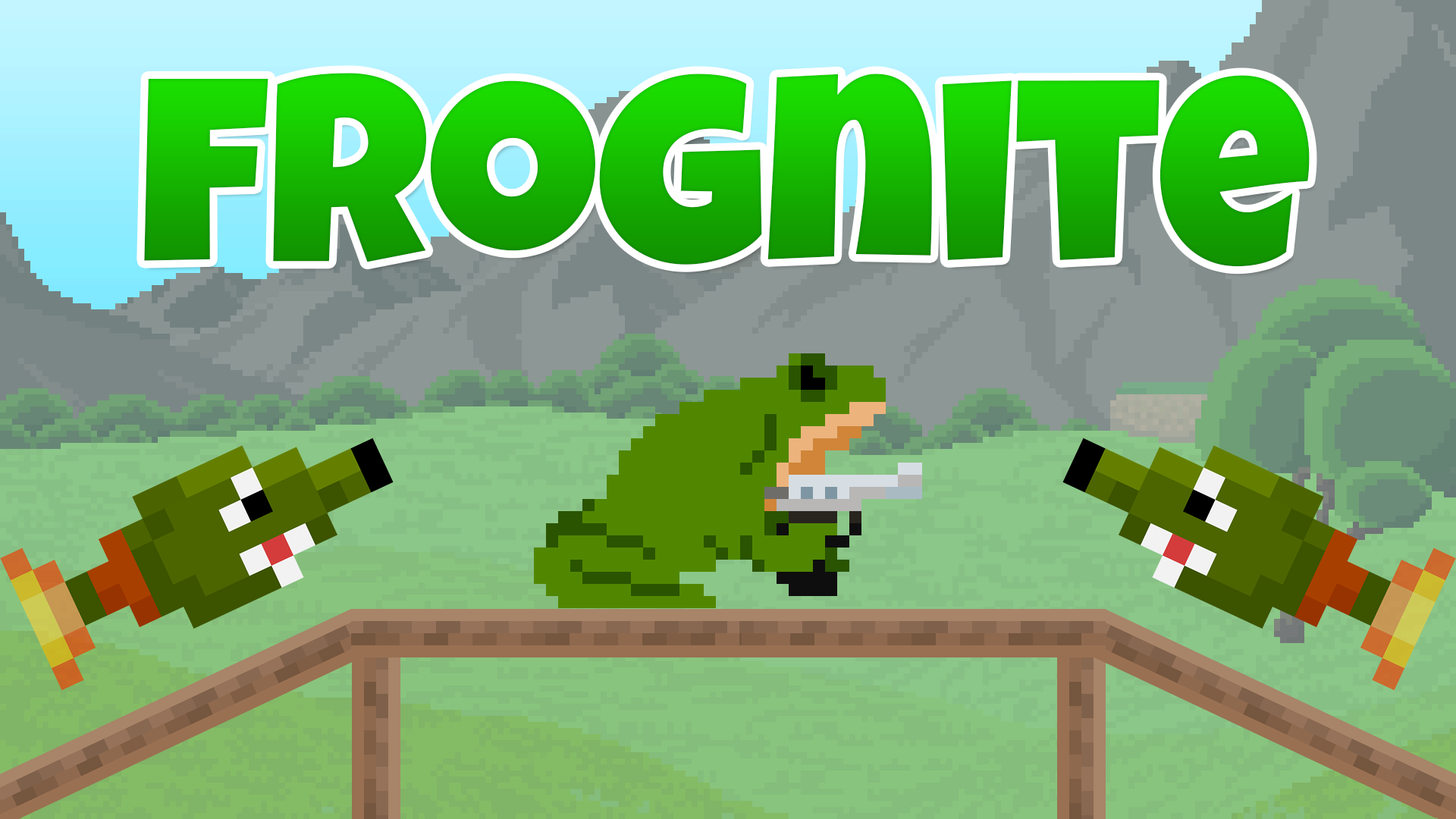
<style>
.page{position:relative;width:1456px;height:819px}
.page>*{position:absolute;margin:0}
.t1{font:265.4px "LuckiestGuy-Regular"}
</style>
<div class="page">
<p class="t1" style="left:144px;top:73px;width:1166px;height:194px">frognite</p>
</div>
